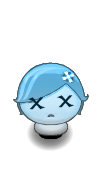
<style>
.page{position:relative;width:101px;height:171px;background:#ffffff}
.page>*{position:absolute;margin:0}
.t1{font:16.5px "StarcraftNormal";color:#022739}
</style>
<div class="page">
<p class="t1" style="left:27px;top:97px;width:19px;height:13px">X</p>
<p class="t1" style="left:56px;top:95px;width:19px;height:13px">X</p>
</div>
